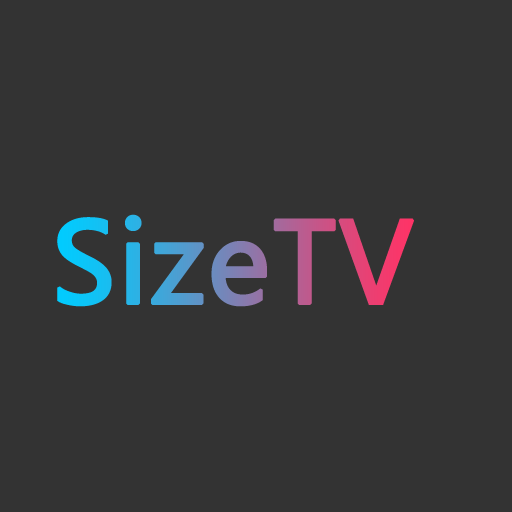
<style>
.page{position:relative;width:512px;height:512px;background:#333333}
.page>*{position:absolute;margin:0}
.t1{font:110px "MicrosoftYaHei";font-weight:bold}
</style>
<div class="page">
<p class="t1" style="left:57px;top:214px;width:357px;height:93px">SizeTV</p>
</div>
